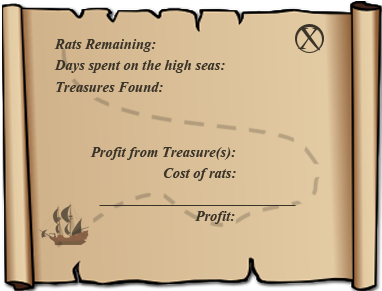
<style>
.page{position:relative;width:382px;height:291px}
.page>*{position:absolute;margin:0}
.t1{font:30px "CharlemagneStd-Bold";color:#3a3328}
.t2{font:18px "Vijaya-Bold";color:#3a3328}
</style>
<div class="page">
<p class="t1" style="left:298px;top:28px;width:23px;height:23px">X</p>
<p class="t2" style="left:54px;top:39px;width:182px;height:185px">Rats Remaining: <br>Days spent on the high seas: <br>Treasures Found: <br><br>              <br> Profit from Treasure(s): <br>   Cost of rats: <br>     <br>            Profit:</p>
</div>
